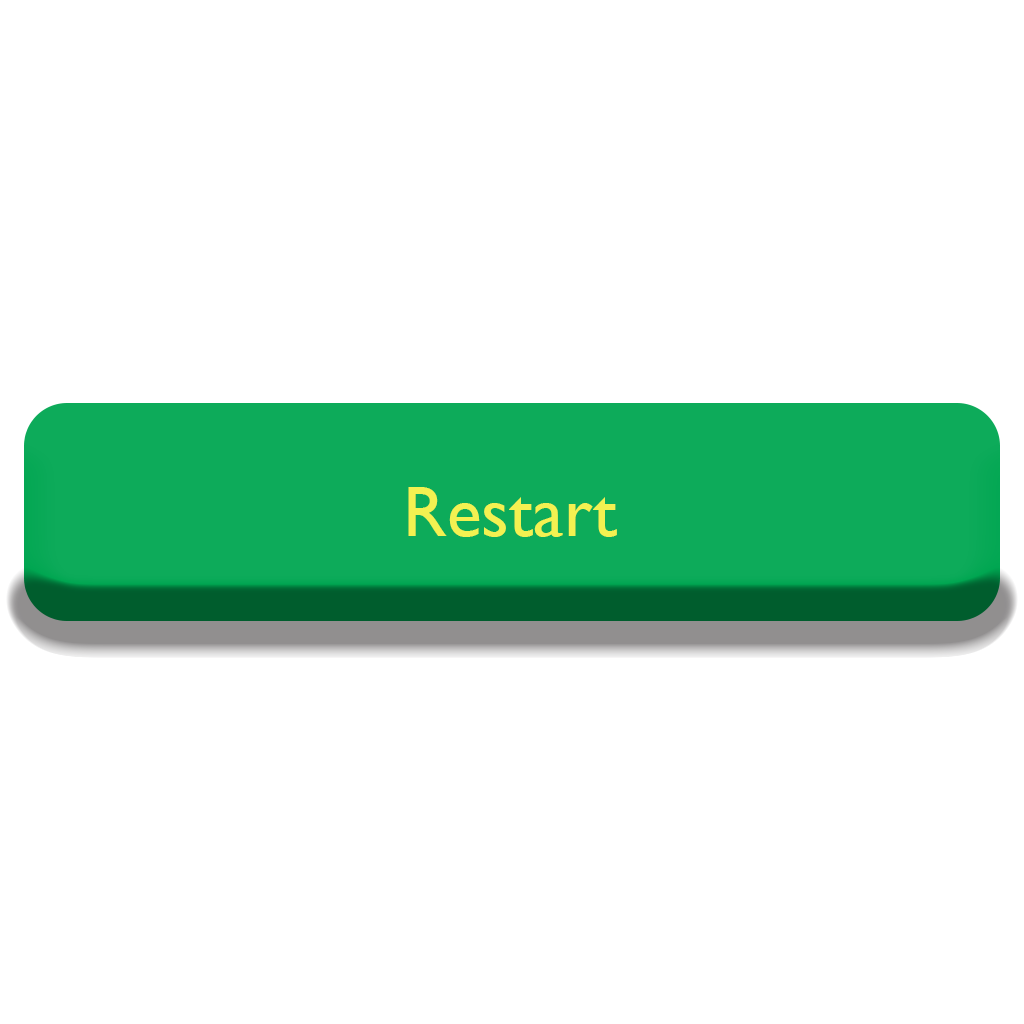
<style>
.page{position:relative;width:1024px;height:1024px;background:#ffffff}
.page>*{position:absolute;margin:0}
.t1{font:72px "GillSansMT";color:#f3f151}
</style>
<div class="page">
<p class="t1" style="left:408px;top:487px;width:209px;height:50px">Restart</p>
</div>
